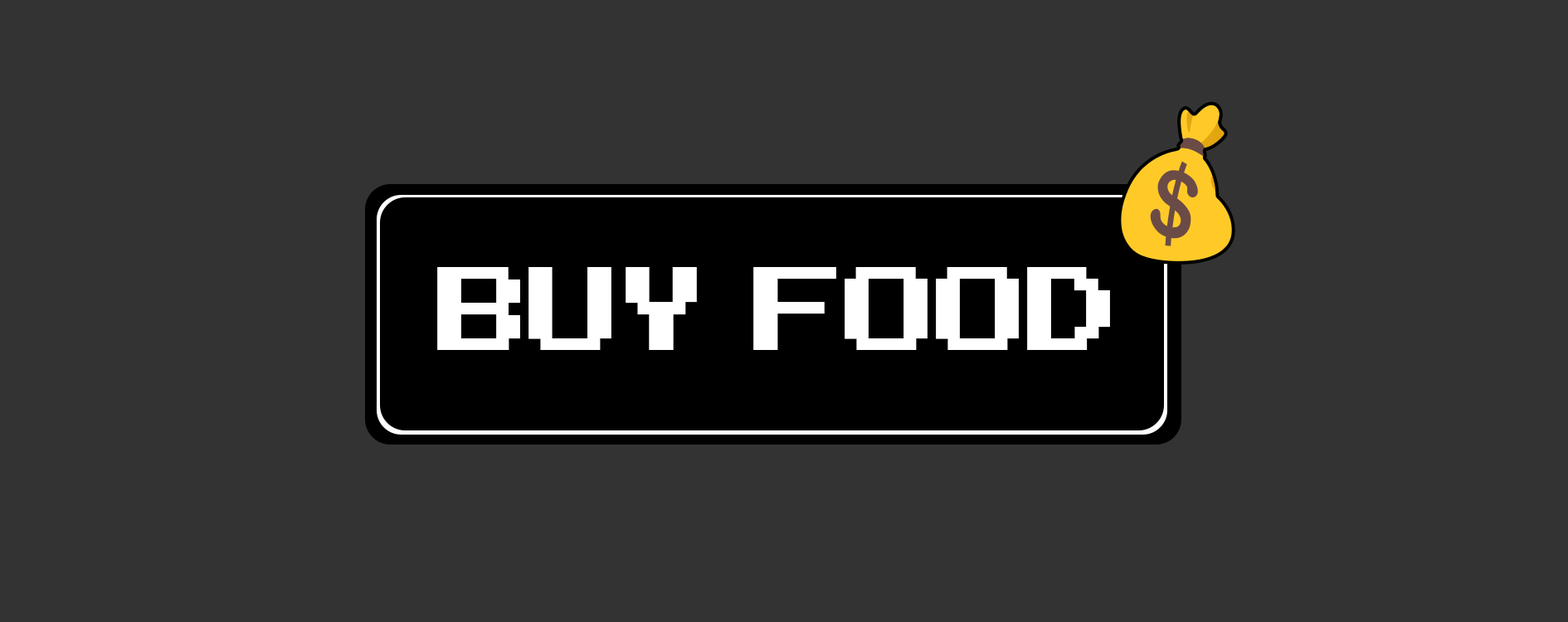
<style>
.page{position:relative;width:1568px;height:622px;background:#333333}
.page>*{position:absolute;margin:0}
.t1{font:165.9px "ArcadeClassic";color:#ffffff}
</style>
<div class="page">
<p class="t1" style="left:437px;top:267px;width:673px;height:83px">BUY  FOOD</p>
</div>
